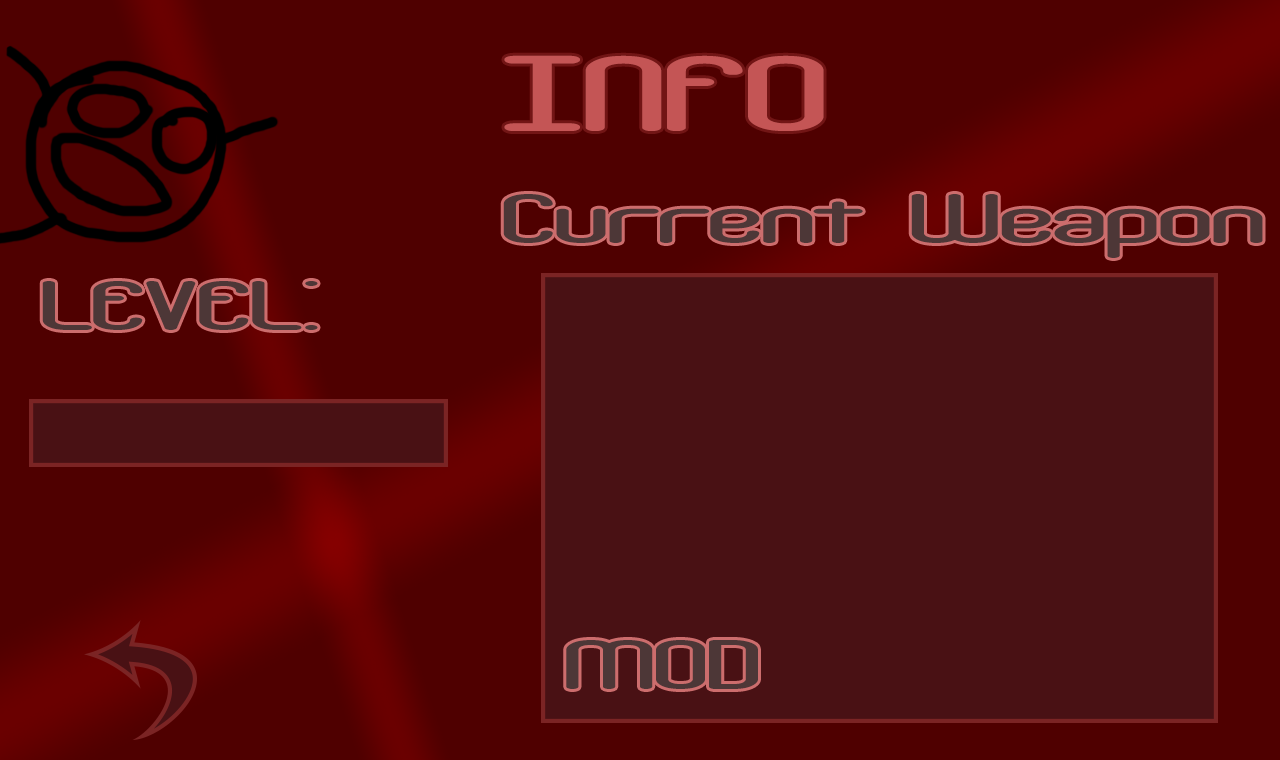
<style>
.page{position:relative;width:1280px;height:760px;background:#4f0000}
.page>*{position:absolute;margin:0}
.t1{font:115px "CrackdownR2BRK";color:#c45555}
.t2{font:75px "CrackdownR2BRK";color:#4d3737}
</style>
<div class="page">
<p class="t1" style="left:504px;top:55px;width:320px;height:76px">INFO</p>
<p class="t2" style="left:503px;top:194px;width:760px;height:64px">Current Weapon</p>
<p class="t2" style="left:42px;top:281px;width:276px;height:49px">:LEVEL</p>
<p class="t2" style="left:566px;top:640px;width:192px;height:49px">MOD</p>
</div>
